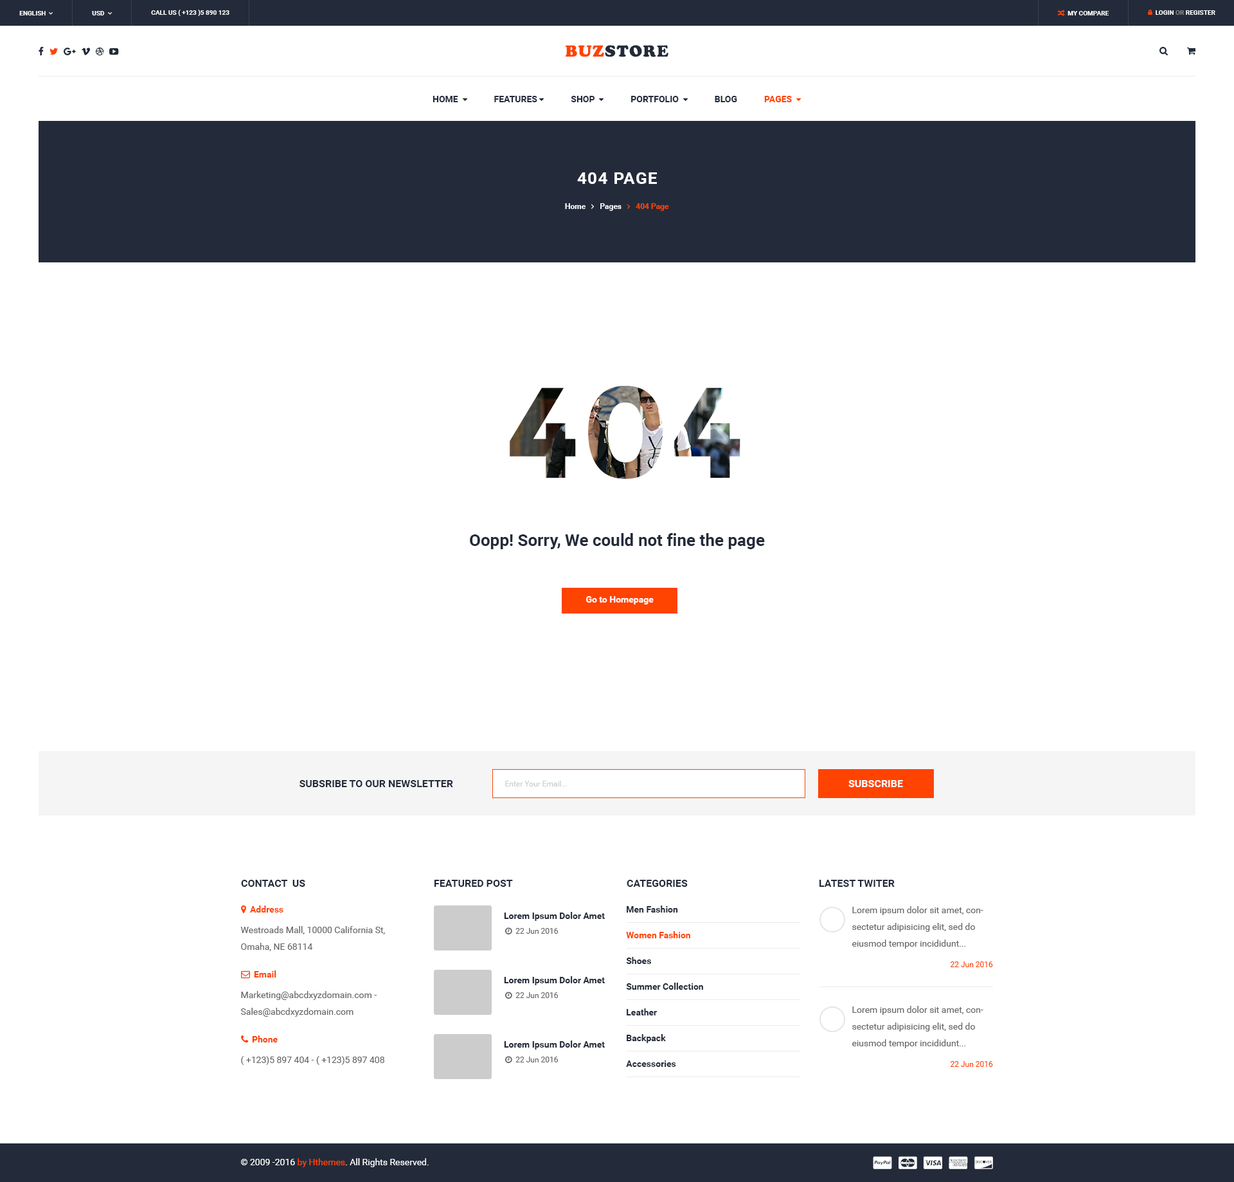
<style>
.page{position:relative;width:1234px;height:1182px;background:#ffffff}
.page>*{position:absolute;margin:0}
.t1{font:6.4px "Roboto-Bold";color:#ffffff;text-transform:uppercase}
.t2{font:16.7px "UTM-Cooper-Black";letter-spacing:0.05em;color:#232b3a;text-transform:uppercase}
.t3{font:16.7px "UTM-Cooper-Black";letter-spacing:0.05em;color:#ff4301;text-transform:uppercase}
.t4{font:16.7px "Roboto-Bold";letter-spacing:0.05em;color:#ffffff;text-transform:uppercase}
.t5{font:16.7px "Roboto-Bold";color:#232b3a}
.t6{font:9px "Roboto-Bold";color:#ffffff}
.t7{font:10.3px "Roboto-Bold";color:#232b3a;text-transform:uppercase}
.t8{font:7.7px "Roboto-Regular";color:#cccccc}
.t9{font:10.3px "Roboto-Bold";color:#ffffff;text-transform:uppercase}
.t10{font:9px/25.7px "Roboto-Bold";color:#232b3a}
.t11{font:9px/25.7px "Roboto-Bold";color:#ff4301}
.t12{font:9px/16.7px "Roboto-Regular";color:#666666}
.t13{font:9px "Roboto-Bold";color:#232b3a}
.t14{font:7.7px "Roboto-Regular";color:#ff4301}
.t15{font:9px "Roboto-Regular";color:#666666}
.t16{font:9px "Roboto-Regular";color:#ffffff}
.t17{font:9px "Roboto-Regular";color:#ff4301}
</style>
<div class="page">
<p class="t1" style="left:151px;top:10px;width:79px;height:6px">call us ( +123 )5 890 123</p>
<p class="t2" style="left:565px;top:45px;width:104px;height:12px"><span class="t3">buz</span>store</p>
<p class="t4" style="left:577px;top:172px;width:80px;height:12px">404 page</p>
<p class="t5" style="left:470px;top:533px;width:295px;height:16px">Oopp! Sorry, We could not fine the page</p>
<p class="t6" style="left:586px;top:596px;width:68px;height:8px">Go to Homepage</p>
<p class="t7" style="left:300px;top:780px;width:153px;height:7px">Subsribe to our newsletter</p>
<p class="t8" style="left:505px;top:780px;width:62px;height:6px">Enter Your Email...</p>
<p class="t9" style="left:849px;top:780px;width:54px;height:7px">Subscribe</p>
<p class="t7" style="left:241px;top:879px;width:64px;height:8px">contact  us</p>
<p class="t7" style="left:435px;top:879px;width:78px;height:8px">featured post</p>
<p class="t7" style="left:627px;top:879px;width:61px;height:8px">categories</p>
<p class="t7" style="left:820px;top:879px;width:75px;height:8px">latest twiter</p>
<p class="t10" style="left:626px;top:905px;width:77px;height:161px">Men Fashion<br><span class="t11">Women Fashion<br></span>Shoes<br>Summer Collection<br>Leather<br>Backpack<br>Accessories</p>
<p class="t12" style="left:852px;top:906px;width:132px;height:42px">Lorem ipsum dolor sit amet, consectetur adipisicing elit, sed do eiusmod tempor incididunt...</p>
<p class="t13" style="left:504px;top:912px;width:101px;height:9px">Lorem Ipsum Dolor Amet</p>
<p class="t12" style="left:240px;top:926px;width:145px;height:25px">Westroads Mall, 10000 California St, Omaha, NE 68114</p>
<p class="t14" style="left:950px;top:961px;width:43px;height:6px">22 Jun 2016</p>
<p class="t13" style="left:504px;top:976px;width:101px;height:9px">Lorem Ipsum Dolor Amet</p>
<p class="t12" style="left:240px;top:991px;width:137px;height:25px">Marketing@abcdxyzdomain.com - <br>Sales@abcdxyzdomain.com</p>
<p class="t12" style="left:852px;top:1005px;width:132px;height:43px">Lorem ipsum dolor sit amet, consectetur adipisicing elit, sed do eiusmod tempor incididunt...</p>
<p class="t13" style="left:504px;top:1040px;width:101px;height:9px">Lorem Ipsum Dolor Amet</p>
<p class="t15" style="left:241px;top:1056px;width:143px;height:9px">( +123)5 897 404 - ( +123)5 897 408</p>
<p class="t14" style="left:950px;top:1061px;width:43px;height:5px">22 Jun 2016</p>
<p class="t16" style="left:241px;top:1158px;width:188px;height:9px">© 2009 -2016 <span class="t17">by Hthemes</span>. All Rights Reserved.</p>
</div>
